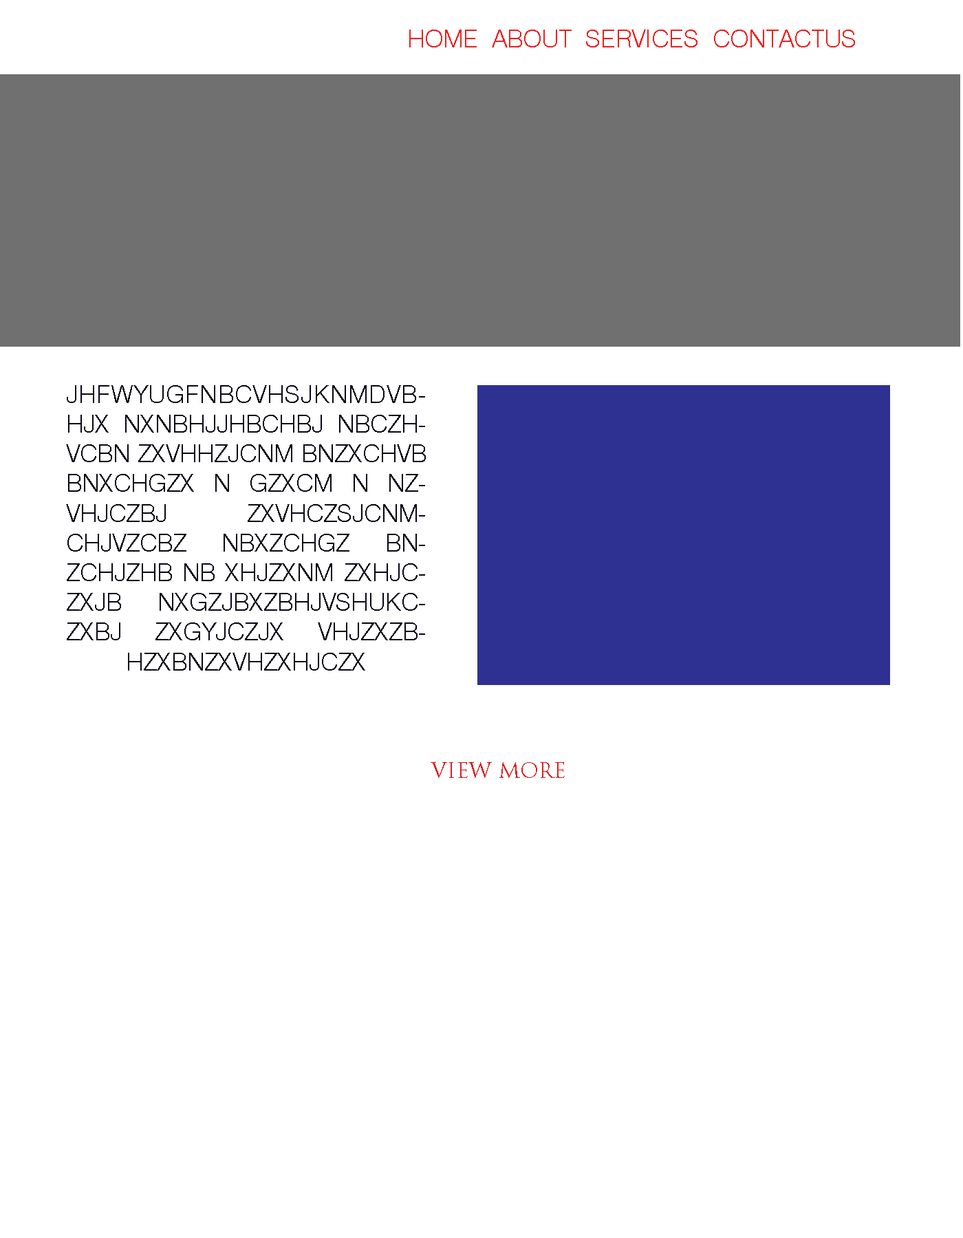
<style>
.page{position:relative;width:963px;height:1238px;background:#ffffff}
.page>*{position:absolute;margin:0}
.t1{font:24.8px "Swiss721BT-Light";color:#ef1f1f}
.t2{font:24.8px "Swiss721BT-Light";color:#cb5555}
.t3{font:24.8px "Swiss721BT-Light";color:#060614}
.t4{font:20.6px "TrajanPro-Regular";color:#dc1f1f}
</style>
<div class="page">
<p class="t1" style="left:409px;top:30px;width:446px;height:17px"><span class="t2"><br></span>HOME  ABOUT  SERVICES  CONTACTUS</p>
<p class="t3" style="left:66px;top:385px;width:360px;height:286px;text-align:justify">JHFWYUGFNBCVHSJKNMDVBHJX NXNBHJJHBCHBJ NBCZHVCBN ZXVHHZJCNM BNZXCHVB BNXCHGZX N GZXCM N NZVHJCZBJ ZXVHCZSJCNMCHJVZCBZ NBXZCHGZ BNZCHJZHB NB XHJZXNM ZXHJCZXJB NXGZJBXZBHJVSHUKCZXBJ ZXGYJCZJX VHJZXZBHZXBNZXVHZXHJCZX</p>
<p class="t4" style="left:431px;top:762px;width:134px;height:16px">VIEW MORE</p>
</div>
